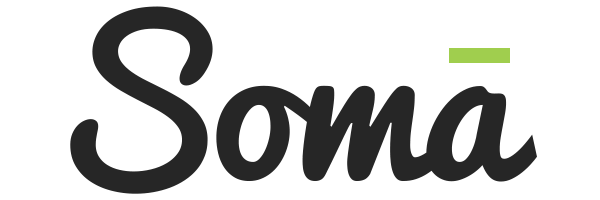
<style>
.page{position:relative;width:600px;height:200px;background:#ffffff}
.page>*{position:absolute;margin:0}
.t1{font:203.1px "Pacifico-Regular";letter-spacing:-0.02em;color:#262626}
</style>
<div class="page">
<p class="t1" style="left:70px;top:6px;width:467px;height:188px">Soma</p>
</div>
